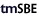
<style>
.page{position:relative;width:39px;height:16px;background:#ffffff}
.page>*{position:absolute;margin:0}
.t1{font:12px "AdobeGothicStd-Bold";letter-spacing:-0.025em;color:#000000}
</style>
<div class="page">
<p class="t1" style="left:17px;top:3px;width:20px;height:11px">SBE</p>
</div>
